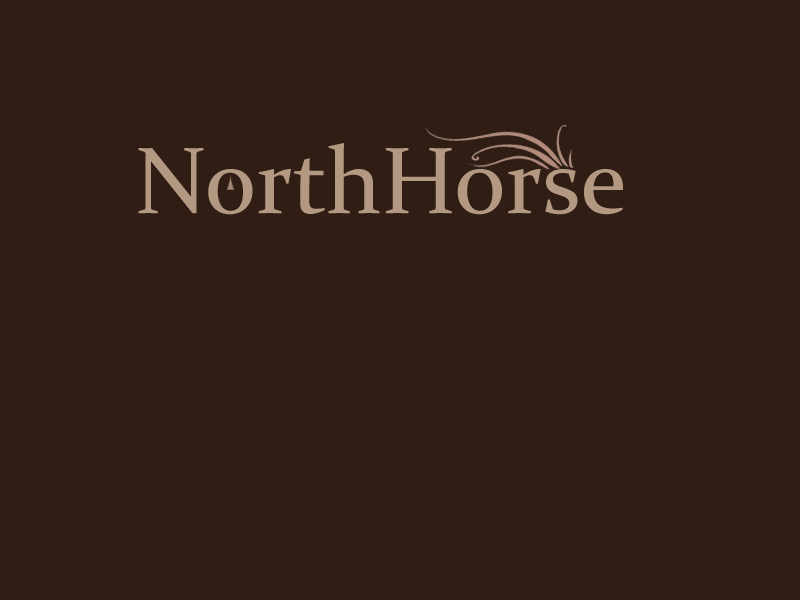
<style>
.page{position:relative;width:800px;height:600px;background:#301e15}
.page>*{position:absolute;margin:0}
.t1{font:95px "Constantia";color:#b49982}
</style>
<div class="page">
<p class="t1" style="left:138px;top:143px;width:485px;height:72px">NorthHorse</p>
</div>
